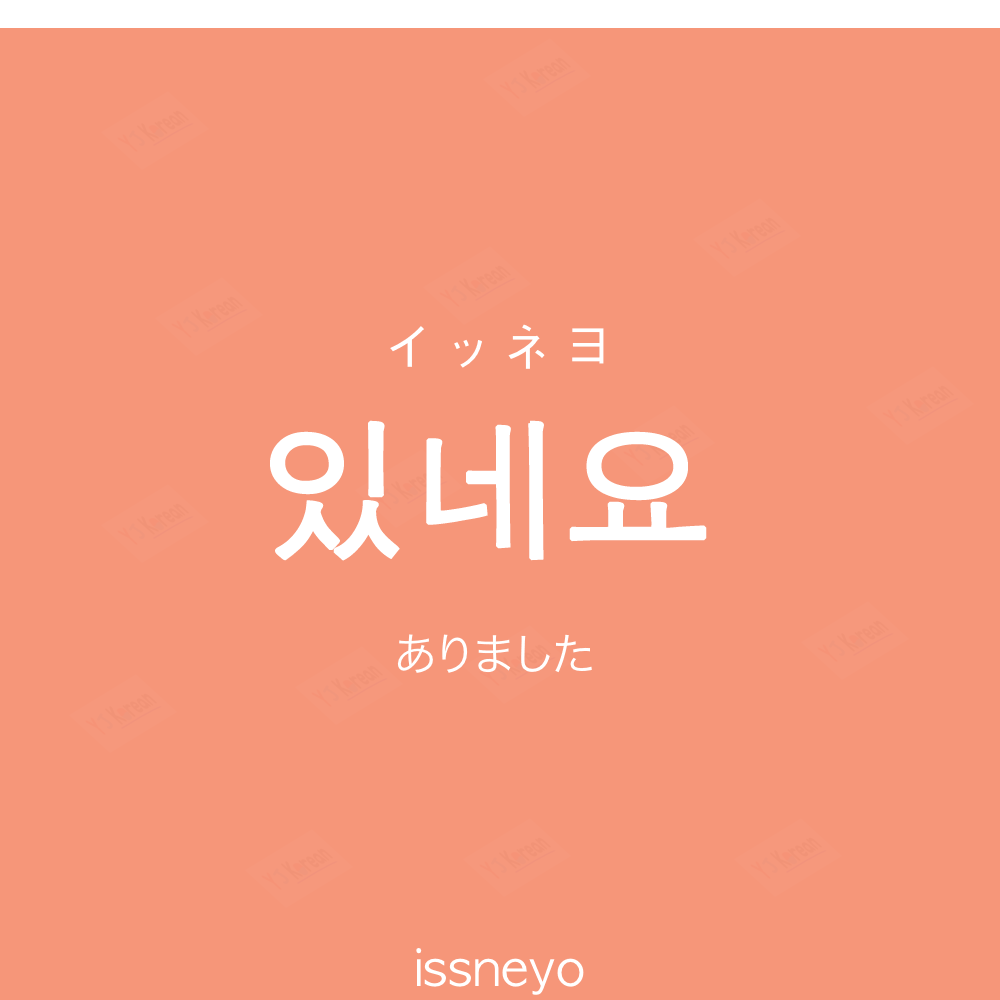
<style>
.page{position:relative;width:1000px;height:1000px;background:#f69679}
.page>*{position:absolute;margin:0}
.t1{font:60px "AppleGothic";color:#ffffff}
.t2{font:150px "AppleGothic";color:#ffffff;font-weight:bold}
.t3{font:45px "HiraKakuProN-W3";color:#ffffff}
.t4{font:50px "AppleGothic";color:#ffffff}
</style>
<div class="page">
<p class="t1" style="left:390px;top:324px;width:214px;height:45px">イッネヨ</p>
<p class="t2" style="left:270px;top:420px;width:437px;height:141px">있네요</p>
<p class="t3" style="left:397px;top:634px;width:195px;height:39px">ありました</p>
<p class="t4" style="left:416px;top:948px;width:168px;height:47px">issneyo</p>
</div>
